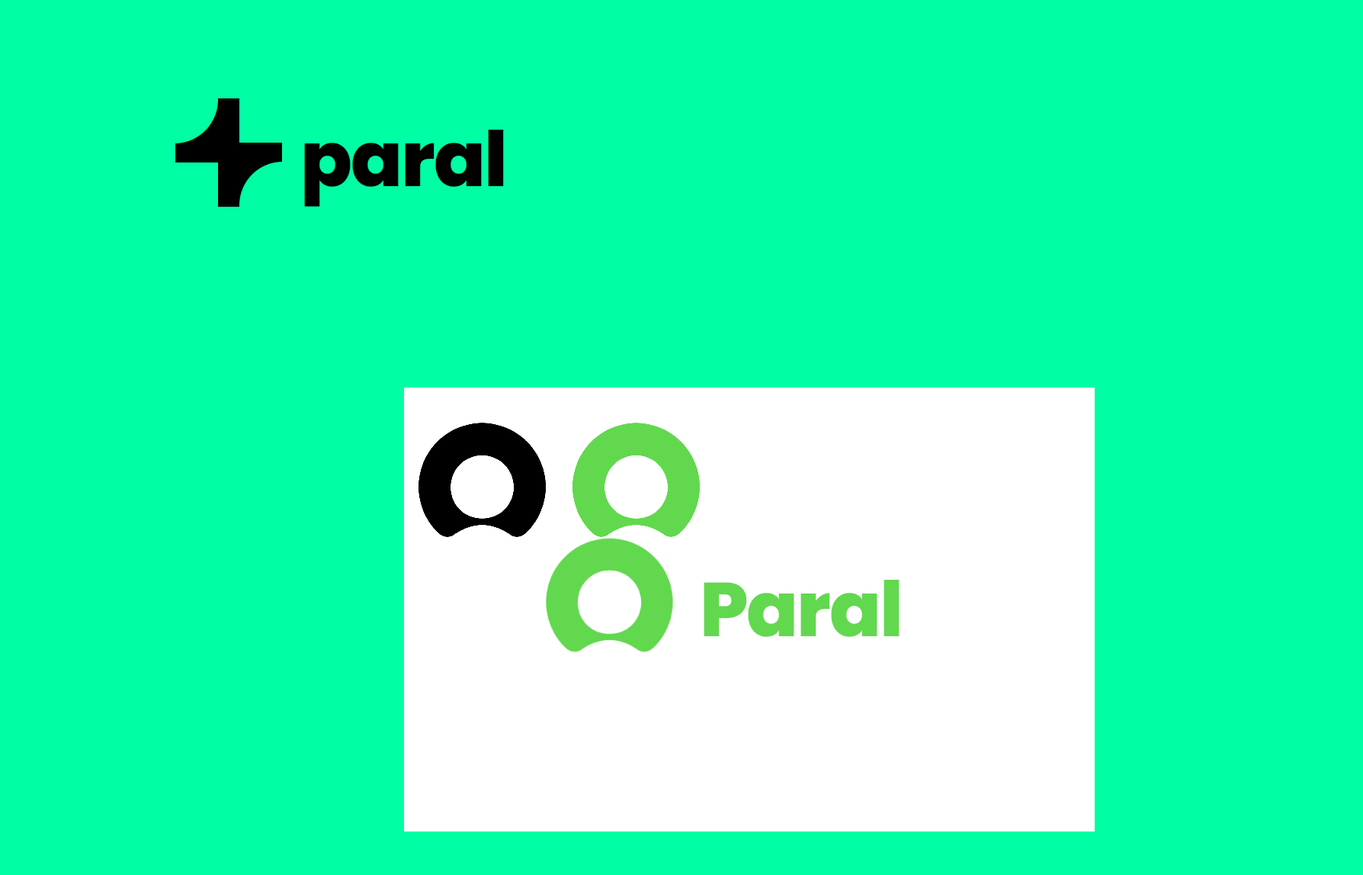
<style>
.page{position:relative;width:1363px;height:875px;background:#00fea4}
.page>*{position:absolute;margin:0}
.t1{font:76.3px "Poppins-ExtraBold";letter-spacing:-0.02em;color:#000000}
.t2{font:76.3px "Poppins-ExtraBold";letter-spacing:-0.02em;color:#62d84e}
</style>
<div class="page">
<p class="t1" style="left:304px;top:130px;width:200px;height:77px">paral</p>
<p class="t2" style="left:704px;top:580px;width:196px;height:57px">Paral</p>
</div>
